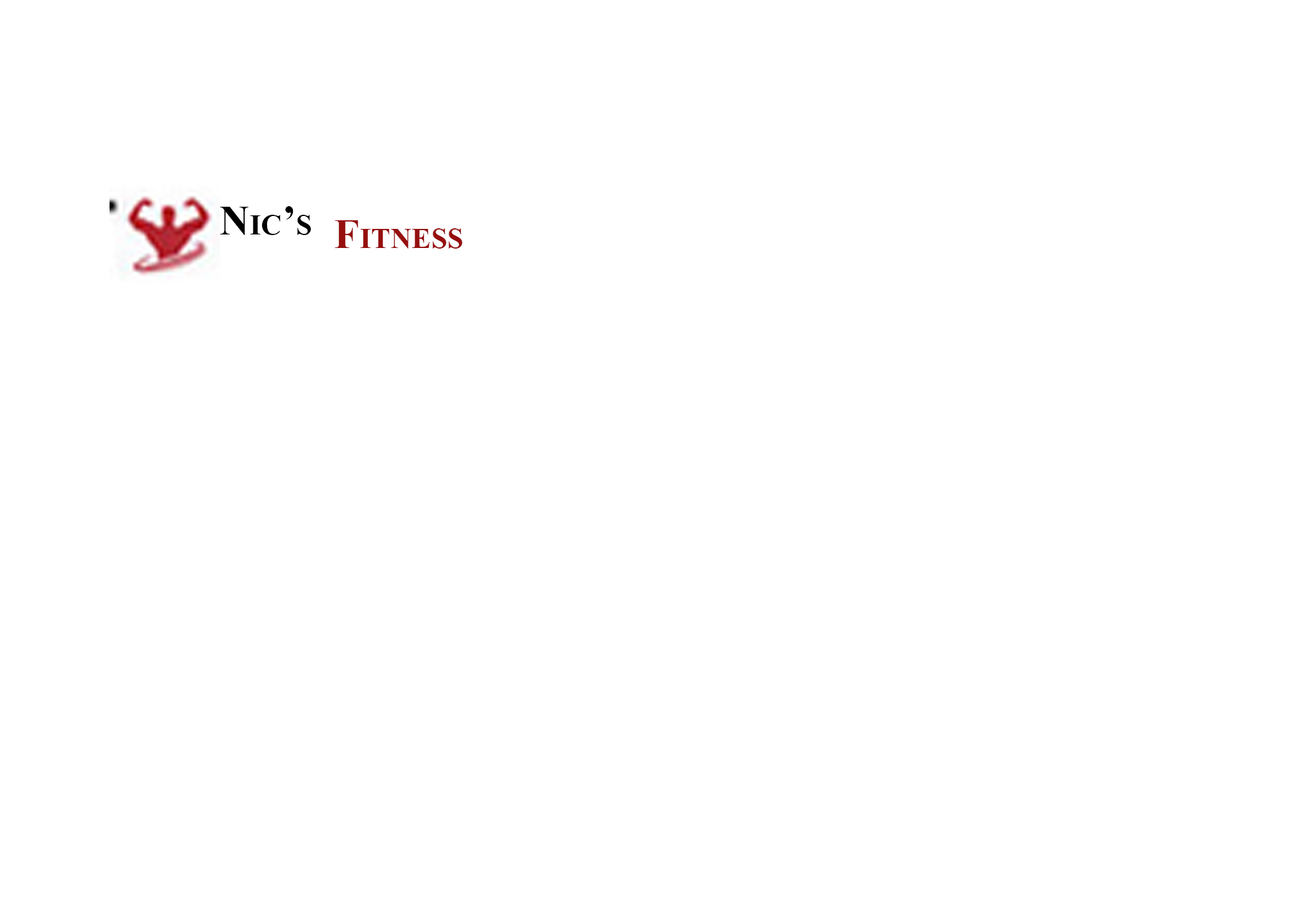
<style>
.page{position:relative;width:1292px;height:923px;background:#ffffff}
.page>*{position:absolute;margin:0}
.t1{font:41px "TimesNewRomanPS-BoldMT";letter-spacing:0.01em;color:#000000;font-variant:small-caps}
.t2{font:41px "TimesNewRomanPS-BoldMT";letter-spacing:0.01em;color:#960f0f;font-variant:small-caps}
</style>
<div class="page">
<p class="t1" style="left:220px;top:206px;width:91px;height:29px">Nic’s</p>
<p class="t2" style="left:335px;top:220px;width:128px;height:29px">Fitness</p>
</div>
